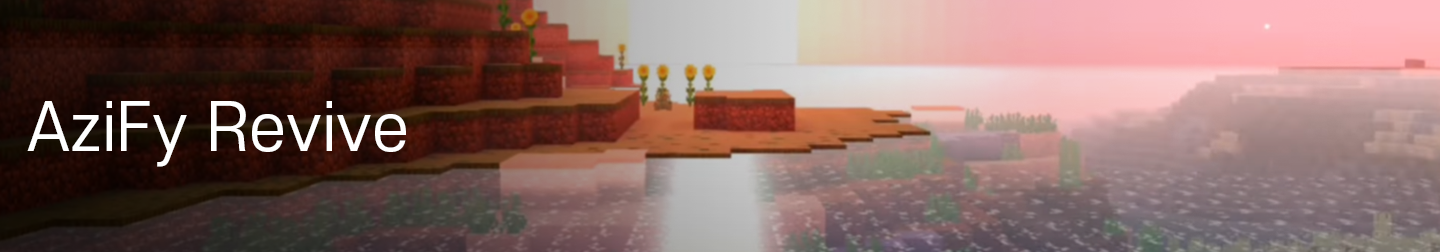
<style>
.page{position:relative;width:1440px;height:252px}
.page>*{position:absolute;margin:0}
.t1{font:64px "S-CoreDream-4Regular";color:#ffffff}
</style>
<div class="page">
<p class="t1" style="left:27px;top:101px;width:379px;height:66px">AziFy Revive</p>
</div>
